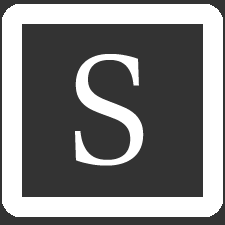
<style>
.page{position:relative;width:225px;height:225px;background:#333333}
.page>*{position:absolute;margin:0}
.t1{font:150px "JavaneseText";letter-spacing:0.035em;color:#ffffff}
</style>
<div class="page">
<p class="t1" style="left:75px;top:54px;width:69px;height:112px">S</p>
</div>
